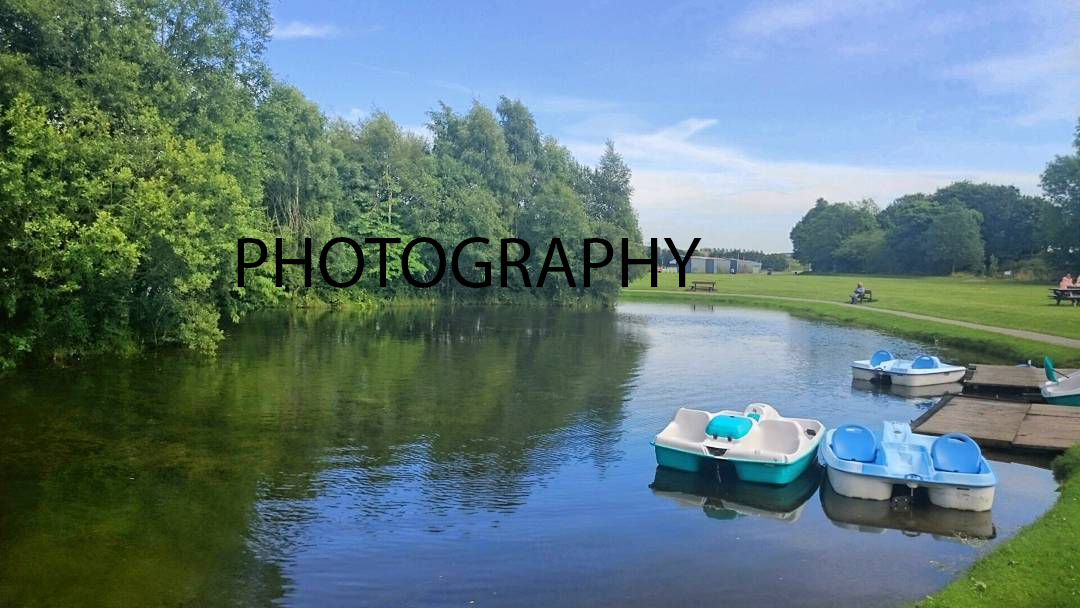
<style>
.page{position:relative;width:1080px;height:608px}
.page>*{position:absolute;margin:0}
.t1{font:72px "MyriadPro-Regular";color:#000000}
</style>
<div class="page">
<p class="t1" style="left:237px;top:237px;width:465px;height:51px">PHOTOGRAPHY</p>
</div>
